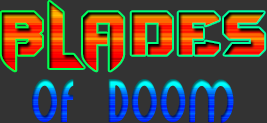
<style>
.page{position:relative;width:267px;height:123px;background:#333333}
.page>*{position:absolute;margin:0}
.t1{font:58.4px "BravoDestroyerPersonalUSE-regular";letter-spacing:0.025em}
.t2{font:47.5px "Minerva";letter-spacing:0.025em}
</style>
<div class="page">
<p class="t1" style="left:1px;top:1px;width:264px;height:70px">BLADES</p>
<p class="t2" style="left:32px;top:79px;width:202px;height:44px">OF DOOM</p>
</div>
